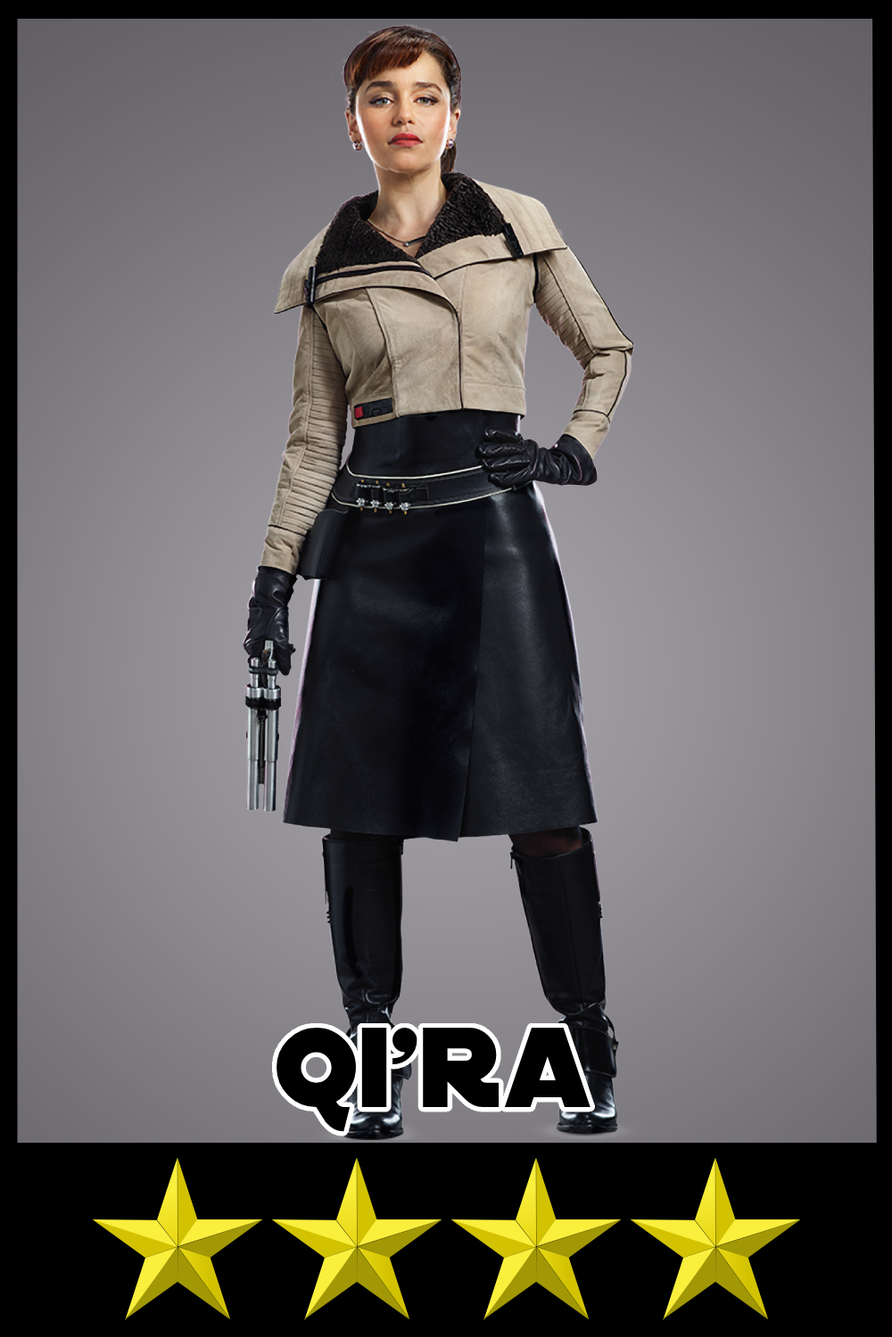
<style>
.page{position:relative;width:892px;height:1337px}
.page>*{position:absolute;margin:0}
.t1{font:122px "DistantGalaxy";color:#000000}
</style>
<div class="page">
<p class="t1" style="left:276px;top:1028px;width:314px;height:104px">Qi'ra</p>
</div>
